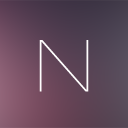
<style>
.page{position:relative;width:128px;height:128px}
.page>*{position:absolute;margin:0}
.t1{font:72px "HelveticaNeue-UltraLight";color:#fffefe;scale:1.25 1}
</style>
<div class="page">
<p class="t1" style="left:39px;top:40px;width:50px;height:52px">N</p>
</div>
